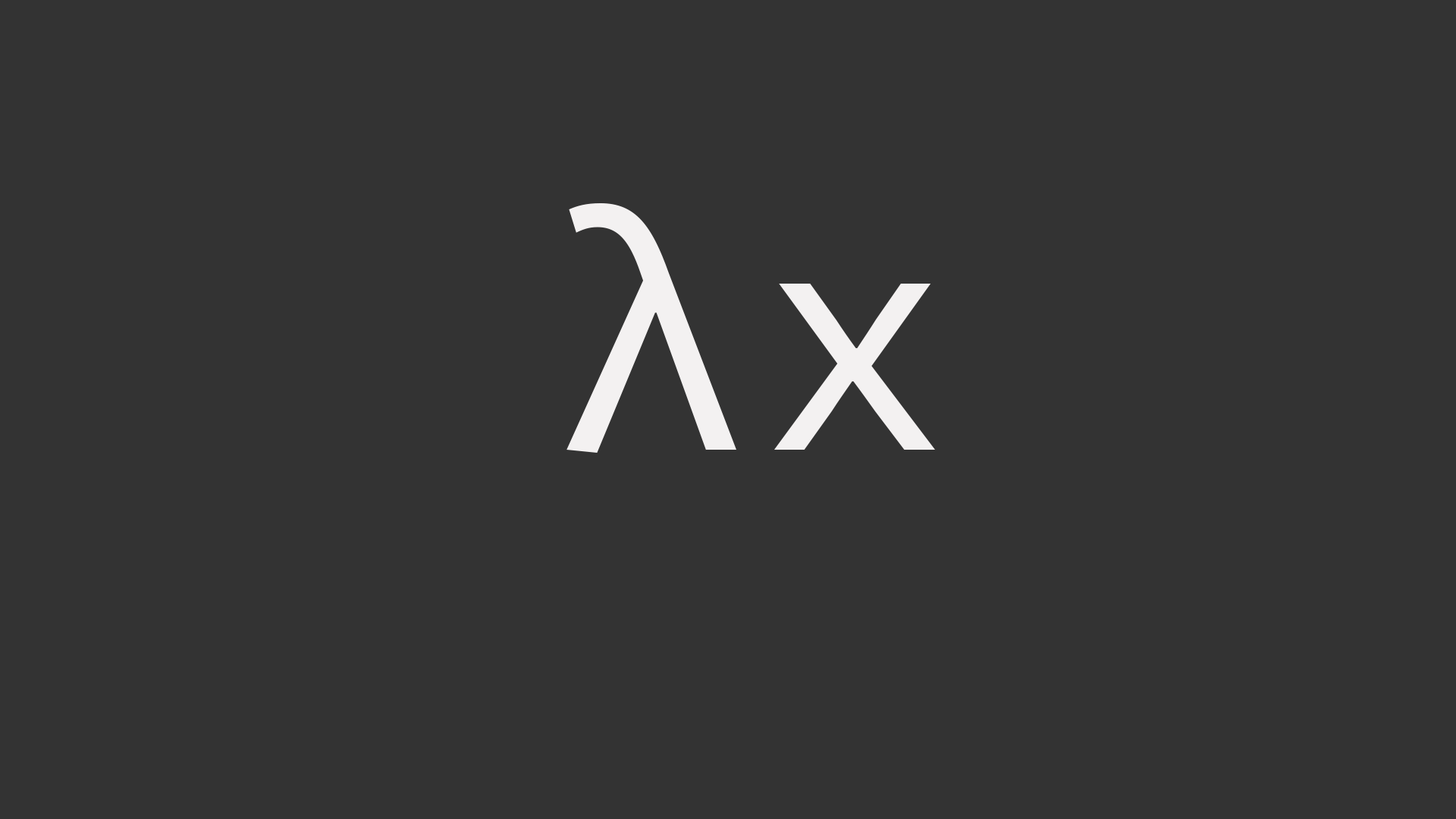
<style>
.page{position:relative;width:1456px;height:819px;background:#333333}
.page>*{position:absolute;margin:0}
.t1{font:341.2px "Hasklig-Regular";color:#f3f1f1}
</style>
<div class="page">
<p class="t1" style="left:566px;top:203px;width:369px;height:250px">λx</p>
</div>
